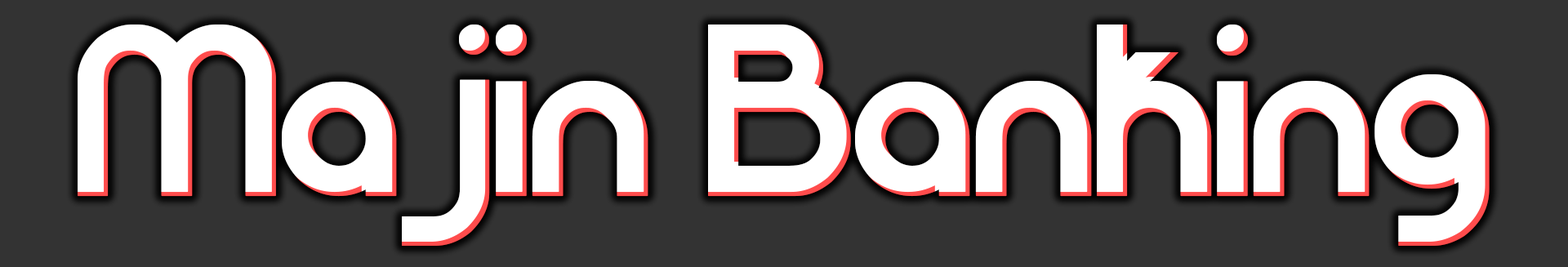
<style>
.page{position:relative;width:1568px;height:267px;background:#333333}
.page>*{position:absolute;margin:0}
.t1{font:245px "PatinioBasica";letter-spacing:-0.025em;color:#ffffff}
</style>
<div class="page">
<p class="t1" style="left:78px;top:24px;width:1412px;height:222px">Majin Banking</p>
</div>
